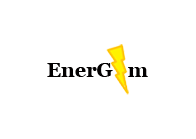
<style>
.page{position:relative;width:196px;height:139px;background:#ffffff}
.page>*{position:absolute;margin:0}
.t1{font:19.9px "Georgia-Bold";color:#030101}
</style>
<div class="page">
<p class="t1" style="left:47px;top:63px;width:101px;height:14px">EnerG   m</p>
</div>
